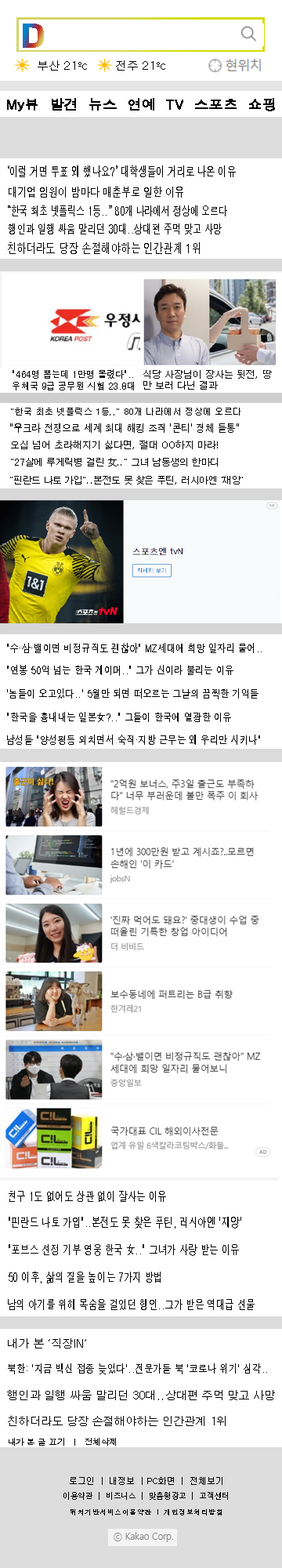
<style>
.page{position:relative;width:282px;height:1568px;background:#ffffff}
.page>*{position:absolute;margin:0}
.t1{font:44px "ahn2006-B";scale:1.4 1}
.t2{font:11.5px "Dotum";color:#000000}
.t3{font:13.3px "Dotum";color:#000000;font-weight:bold;scale:1.06 1}
.t4{font:13.6px "Dotum";color:#000000;scale:0.65 1}
.t5{font:12.7px "Dotum";color:#000000;scale:0.74 1}
.t6{font:13px "Dotum";color:#000000;scale:0.66 1}
.t7{font:12.6px "Dotum";color:#000000;scale:0.7 1}
.t8{font:13.9px "Dotum";color:#000000;scale:0.7 1}
.t9{font:9.9px "Dotum";color:#000000;scale:0.89 1}
.t10{font:9.2px "Dotum";color:#000000}
.t11{font:9px "Dotum";color:#000000}
.t12{font:10.8px "Dotum";color:#000000;scale:0.85 1}
.t13{font:9.4px "Dotum";color:#000000}
.t14{font:11.2px "Dotum";color:#000000;scale:0.8 1}
.t15{font:13px "Dotum";color:#000000;scale:0.7 1}
.t16{font:11px "Dotum";color:#000000}
.t17{font:11.5px "Dotum";color:#000000;scale:0.79 1}
.t18{font:8.4px "Dotum";color:#000000}
.t19{font:8.6px "Dotum";color:#000000}
.t20{font:8.8px "Dotum";color:#000000;scale:0.86 1}
.t21{font:7.4px "Dotum";color:#000000}
</style>
<div class="page">
<p class="t1" style="left:23px;top:24px;width:21px;height:24px">D</p>
<p class="t2" style="left:38px;top:60px;width:49px;height:11px">부산 21ºc</p>
<p class="t2" style="left:116px;top:60px;width:49px;height:11px">전주 21ºc</p>
<p class="t3" style="left:7px;top:98px;width:268px;height:13px">My뷰  발견  뉴스  연예  TV  스포츠  쇼핑</p>
<p class="t4" style="left:8px;top:165px;width:228px;height:12px">‘이럴 거면 투표 왜 했나요?’ 대학생들이 거리로 나온 이유</p>
<p class="t5" style="left:9px;top:187px;width:174px;height:11px">대기업 임원이 밤마다 매춘부로 일한 이유</p>
<p class="t6" style="left:8px;top:205px;width:219px;height:12px">“한국 최초 넷플릭스 1등..” 80개 나라에서 정상에 오르다</p>
<p class="t7" style="left:9px;top:223px;width:213px;height:11px">행인과 일행 싸움 말리던 30대..상대편 주먹 맞고 사망</p>
<p class="t8" style="left:8px;top:242px;width:192px;height:12px">친하더라도 당장 손절해야하는 인간관계 1위</p>
<p class="t9" style="left:13px;top:369px;width:121px;height:21px">"464명 뽑는데 1만명 몰렸다"..<br>우체국 9급 공무원 시험 23.8대</p>
<p class="t10" style="left:143px;top:370px;width:129px;height:20px">식당 사장님이 장사는 뒷전, 땅<br>만 보러 다닌 결과</p>
<p class="t11" style="left:11px;top:408px;width:230px;height:8px">"한국 최초 넷플릭스 1등.." 80개 나라에서 정상에 오르다</p>
<p class="t12" style="left:10px;top:423px;width:229px;height:10px">"우크라 전쟁으로 세계 최대 해킹 조직 '콘티' 정체 들통"</p>
<p class="t13" style="left:11px;top:441px;width:207px;height:8px">오십 넘어 초라해지기 싫다면, 절대 OO하지 마라!</p>
<p class="t10" style="left:11px;top:458px;width:207px;height:8px">"27살에 루게릭병 걸린 女.." 그녀 남동생의 한마디</p>
<p class="t11" style="left:10px;top:476px;width:233px;height:9px">"핀란드 나토 가입"..본전도 못 찾은 푸틴, 러시아엔 '재앙'</p>
<p class="t14" style="left:7px;top:643px;width:255px;height:10px">"수·삼·밸이면 비정규직도 괜찮아" MZ세대에 희망 일자리 물어..</p>
<p class="t14" style="left:7px;top:665px;width:227px;height:11px">"연봉 50억 넘는 한국 게이머.." 그가 신이라 불리는 이유</p>
<p class="t14" style="left:7px;top:688px;width:252px;height:11px">'놈들이 오고있다..' 5월만 되면 떠오르는 그날의 끔찍한 기억들</p>
<p class="t14" style="left:7px;top:712px;width:224px;height:10px">"한국을 흉내내는 일본女?.." 그들이 한국에 열광한 이유</p>
<p class="t14" style="left:7px;top:735px;width:253px;height:10px">남성들 "양성평등 외치면서 숙직·지방 근무는 왜 우리만 시키나"</p>
<p class="t15" style="left:9px;top:1191px;width:157px;height:11px">친구 1도 없어도 상관 없이 잘사는 이유</p>
<p class="t15" style="left:9px;top:1217px;width:232px;height:12px">"핀란드 나토 가입"..본전도 못 찾은 푸틴, 러시아엔 '재앙'</p>
<p class="t15" style="left:9px;top:1244px;width:230px;height:12px">"포브스 선정 기부 영웅 한국 女.." 그녀가 사랑 받는 이유</p>
<p class="t15" style="left:9px;top:1272px;width:152px;height:11px">50 이후, 삶의 질을 높이는 7가지 방법</p>
<p class="t15" style="left:8px;top:1299px;width:247px;height:11px">남의 아기를 위해 목숨을 걸었던 행인..그가 받은 역대급 선물</p>
<p class="t16" style="left:8px;top:1338px;width:78px;height:10px">내가 본 ‘직장IN’</p>
<p class="t17" style="left:8px;top:1363px;width:259px;height:11px">북한: '지금 백신 접종 늦었다'..전문가들 북 '코로나 위기' 심각..</p>
<p class="t16" style="left:7px;top:1390px;width:268px;height:10px">행인과 일행 싸움 말리던 30대..상대편 주먹 맞고 사망</p>
<p class="t16" style="left:8px;top:1416px;width:218px;height:10px">친하더라도 당장 손절해야하는 인간관계 1위</p>
<p class="t18" style="left:9px;top:1438px;width:107px;height:8px">내가 본 글 끄기  ㅣ  전체삭제</p>
<p class="t19" style="left:70px;top:1477px;width:153px;height:8px">로그인 ㅣ 내정보 ㅣPC화면 ㅣ 전체보기</p>
<p class="t20" style="left:64px;top:1492px;width:164px;height:8px">이용약관 ㅣ 비즈니스 ㅣ 맞춤형광고 ㅣ 고객센터</p>
<p class="t21" style="left:71px;top:1509px;width:151px;height:6px">위치기반서비스이용약관 ㅣ 개인정보처리방침</p>
</div>
